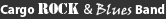
<style>
.page{position:relative;width:166px;height:19px;background:#333333}
.page>*{position:absolute;margin:0}
.t1{font:13px "MyriadPro-Bold";color:#ffffff}
.t2{font:14px "StencilStd";color:#ffffff}
.t3{font:14px "MyriadPro-Regular";color:#ffffff}
.t4{font:14px "VinerHandITC";color:#ffffff}
</style>
<div class="page">
<p class="t1" style="left:0px;top:3px;width:165px;height:14px">Cargo <span class="t2">ROCK </span><span class="t3">&amp;</span><span class="t4"> Blues </span>Band</p>
</div>
